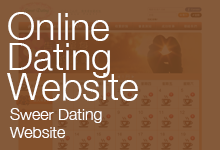
<style>
.page{position:relative;width:220px;height:150px;background:#845a3a}
.page>*{position:absolute;margin:0}
.t1{font:38px/30px "HelveticaNeue-Light";color:#ffffff}
.t2{font:16px/18px "HelveticaNeue-Light";color:#ffffff}
</style>
<div class="page">
<p class="t1" style="left:7px;top:12px;width:131px;height:89px">Online <br>Dating<br>Website</p>
<p class="t2" style="left:9px;top:108px;width:93px;height:30px">Sweer Dating <br>Website</p>
</div>
